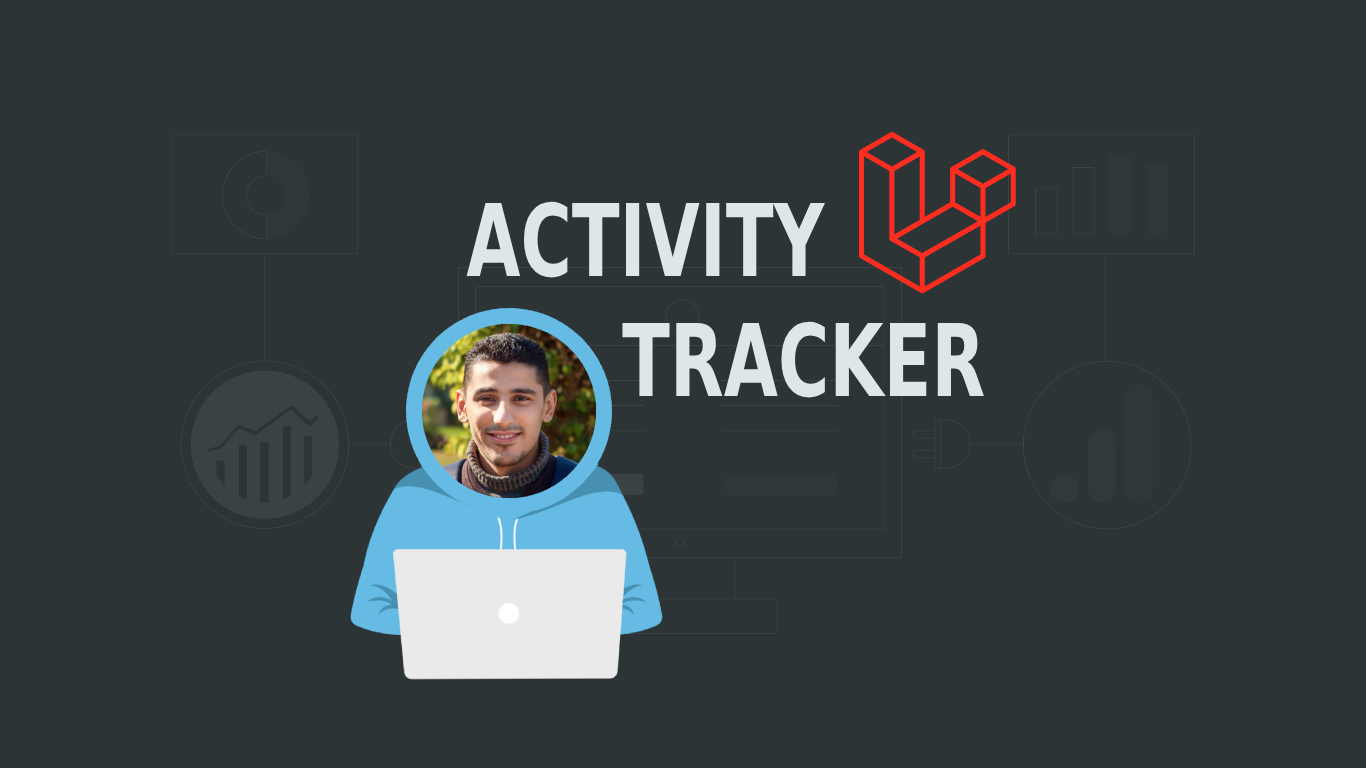
<style>
.page{position:relative;width:1366px;height:768px;background:#2d3436}
.page>*{position:absolute;margin:0}
.t1{font:100px "DejaVuSans-Bold";color:#dfe6e9;text-transform:uppercase;scale:0.7 1}
</style>
<div class="page">
<p class="t1" style="left:466px;top:201px;width:518px;height:197px;text-align:center">Activity<br>                    Tracker</p>
</div>
